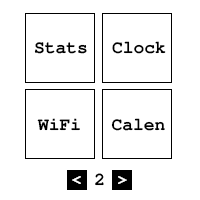
<style>
.page{position:relative;width:200px;height:200px;background:#ffffff}
.page>*{position:absolute;margin:0}
.t1{font:17.9px "FreeMonoBold";color:#000000}
.t2{font:17.9px "FreeMonoBold";color:#ffffff}
</style>
<div class="page">
<p class="t1" style="left:112px;top:41px;width:54px;height:13px">Clock</p>
<p class="t1" style="left:34px;top:42px;width:53px;height:12px">Stats</p>
<p class="t1" style="left:37px;top:118px;width:43px;height:13px">WiFi</p>
<p class="t1" style="left:111px;top:118px;width:54px;height:13px">Calen</p>
<p class="t1" style="left:95px;top:173px;width:9px;height:13px">2</p>
<p class="t2" style="left:72px;top:176px;width:9px;height:8px">&lt;</p>
<p class="t2" style="left:118px;top:176px;width:9px;height:8px">&gt;</p>
</div>
